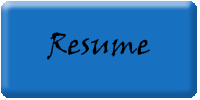
<style>
.page{position:relative;width:200px;height:100px;background:#1870c1}
.page>*{position:absolute;margin:0}
.t1{font:30px "VinerHandITC";color:#000000}
</style>
<div class="page">
<p class="t1" style="left:47px;top:32px;width:103px;height:28px">Resume</p>
</div>
